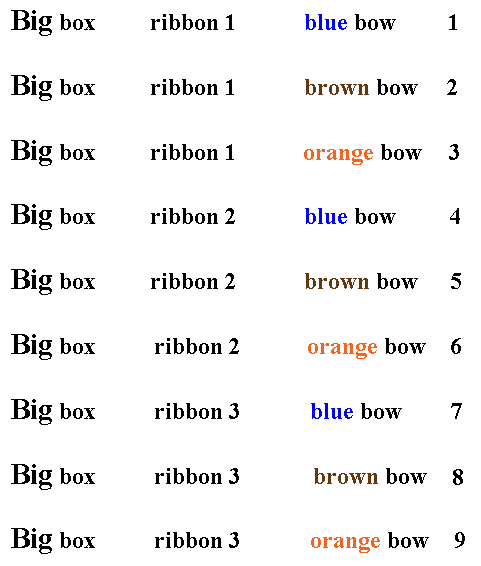
<style>
.page{position:relative;width:481px;height:566px;background:#ffffff}
.page>*{position:absolute;margin:0}
.t1{font:24px "TimesNewRomanPS-BoldMT";color:#000000}
.t2{font:30px "TimesNewRomanPS-BoldMT";color:#000000}
.t3{font:24px "TimesNewRomanPS-BoldMT";color:#0000ff}
.t4{font:24px "TimesNewRomanPS-BoldMT";color:#603913}
.t5{font:24px "TimesNewRomanPS-BoldMT";color:#f26522}
</style>
<div class="page">
<p class="t1" style="left:11px;top:10px;width:418px;height:544px"><span class="t2">Big</span> box         ribbon 1         <span class="t3">blue </span>bow<br><br><span class="t2">Big</span> box         ribbon 1      <span class="t4">brown </span>bow <br><br><span class="t2">Big</span> box         ribbon 1           <span class="t5">orange </span>bow<br><br><span class="t2">Big</span> box         ribbon 2         <span class="t3">blue </span>bow<br><br><span class="t2">Big</span> box         ribbon 2         <span class="t4">brown </span>bow<br><br><span class="t2">Big</span> box       ribbon 2           <span class="t5">orange </span>bow<br><br><span class="t2">Big</span> box        ribbon 3         <span class="t3">blue </span>bow<br><br><span class="t2">Big</span> box       ribbon 3            <span class="t4">brown </span>bow<br><br><span class="t2">Big</span> box         ribbon 3           <span class="t5">orange </span>bow</p>
<p class="t1" style="left:449px;top:14px;width:8px;height:16px">1</p>
<p class="t1" style="left:447px;top:79px;width:10px;height:16px">2</p>
<p class="t1" style="left:449px;top:144px;width:10px;height:16px">3</p>
<p class="t1" style="left:450px;top:208px;width:10px;height:16px">4</p>
<p class="t1" style="left:451px;top:273px;width:10px;height:16px">5</p>
<p class="t1" style="left:451px;top:338px;width:10px;height:16px">6</p>
<p class="t1" style="left:451px;top:403px;width:11px;height:16px">7</p>
<p class="t1" style="left:453px;top:469px;width:10px;height:16px">8</p>
<p class="t1" style="left:455px;top:532px;width:10px;height:16px">9</p>
</div>
